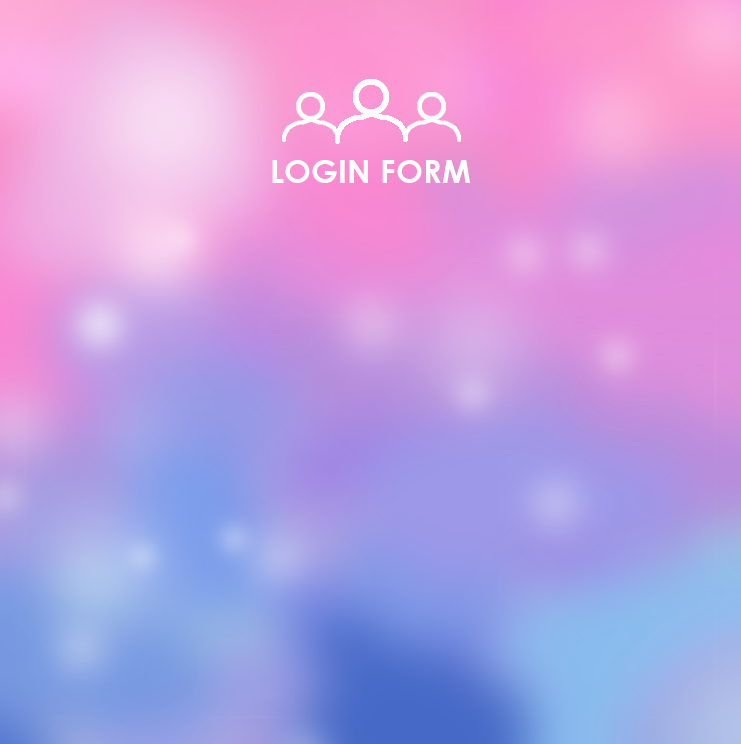
<style>
.page{position:relative;width:741px;height:744px}
.page>*{position:absolute;margin:0}
.t1{font:32.3px "CenturyGothic-Bold";color:#ffffff}
</style>
<div class="page">
<p class="t1" style="left:272px;top:160px;width:198px;height:23px">LOGIN FORM</p>
</div>
